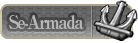
<style>
.page{position:relative;width:138px;height:43px}
.page>*{position:absolute;margin:0}
.t1{font:18px "RyuminPro-ExBold";letter-spacing:-0.08em;color:#b8b8b8;scale:0.9 1}
</style>
<div class="page">
<p class="t1" style="left:9px;top:15px;width:75px;height:14px">Se-Armada</p>
</div>
